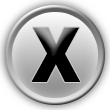
<style>
.page{position:relative;width:110px;height:110px}
.page>*{position:absolute;margin:0}
.t1{font:76.1px "Arial-Black";letter-spacing:-0.05em;color:#000000;scale:0.83 1}
</style>
<div class="page">
<p class="t1" style="left:31px;top:27px;width:50px;height:55px">X</p>
</div>
